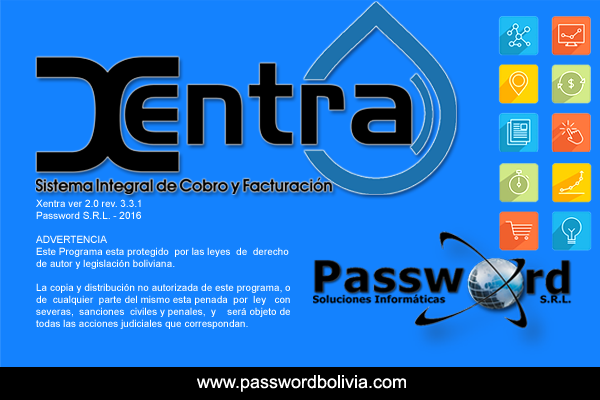
<style>
.page{position:relative;width:600px;height:400px;background:#1482fe}
.page>*{position:absolute;margin:0}
.t1{font:10px "ArialMT";color:#ffffff}
.t2{font:18px "ArialMT";color:#ffffff}
</style>
<div class="page">
<p class="t1" style="left:36px;top:199px;width:254px;height:130px;text-align:justify">Xentra ver 2.0 rev. 3.3.1<br>Password S.R.L. - 2016<br><br>ADVERTENCIA<br>Este Programa esta protegido  por las leyes  de  derecho<br>de autor y legislación boliviana.<br><br>La copia y distribución no autorizada de este programa, o<br>de  cualquier  parte del mismo esta penada  por  ley   con<br>severas,  sanciones  civiles y penales,  y    será objeto de<br>todas las acciones judiciales que correspondan.</p>
<p class="t2" style="left:197px;top:375px;width:209px;height:17px">www.passwordbolivia.com</p>
</div>
